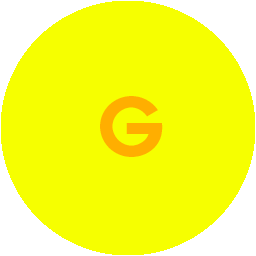
<style>
.page{position:relative;width:256px;height:256px;background:#f6ff00}
.page>*{position:absolute;margin:0}
.t1{font:80px "Renogare-Regular";color:#ffae00}
</style>
<div class="page">
<p class="t1" style="left:100px;top:96px;width:63px;height:61px">G</p>
</div>
